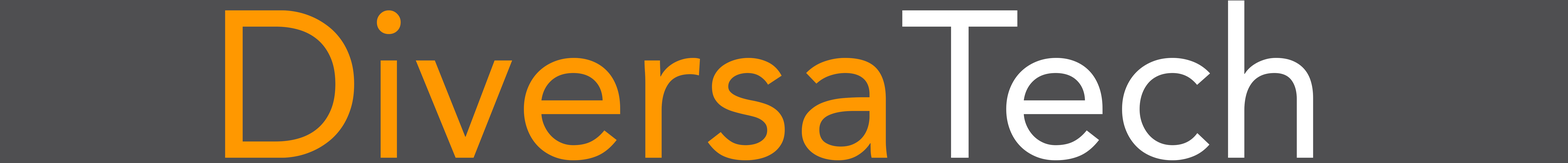
<style>
.page{position:relative;width:1568px;height:163px;background:#4f4f51}
.page>*{position:absolute;margin:0}
.t1{font:208.2px "Avenir-Roman";color:#ff9800}
.t2{font:208.2px "Avenir-Roman";color:#ffffff}
</style>
<div class="page">
<p class="t1" style="left:225px;top:0px;width:1088px;height:161px">Diversa<span class="t2">Tech</span></p>
</div>
